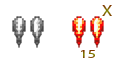
<style>
.page{position:relative;width:120px;height:70px;background:#ffffff}
.page>*{position:absolute;margin:0}
.t1{font:11.7px "MyriadPro-Regular";scale:1.21 1}
.t2{font:9px "MyriadPro-Regular";scale:1.37 1}
</style>
<div class="page">
<p class="t1" style="left:102px;top:5px;width:10px;height:11px">X</p>
<p class="t2" style="left:81px;top:50px;width:14px;height:8px">15</p>
</div>
